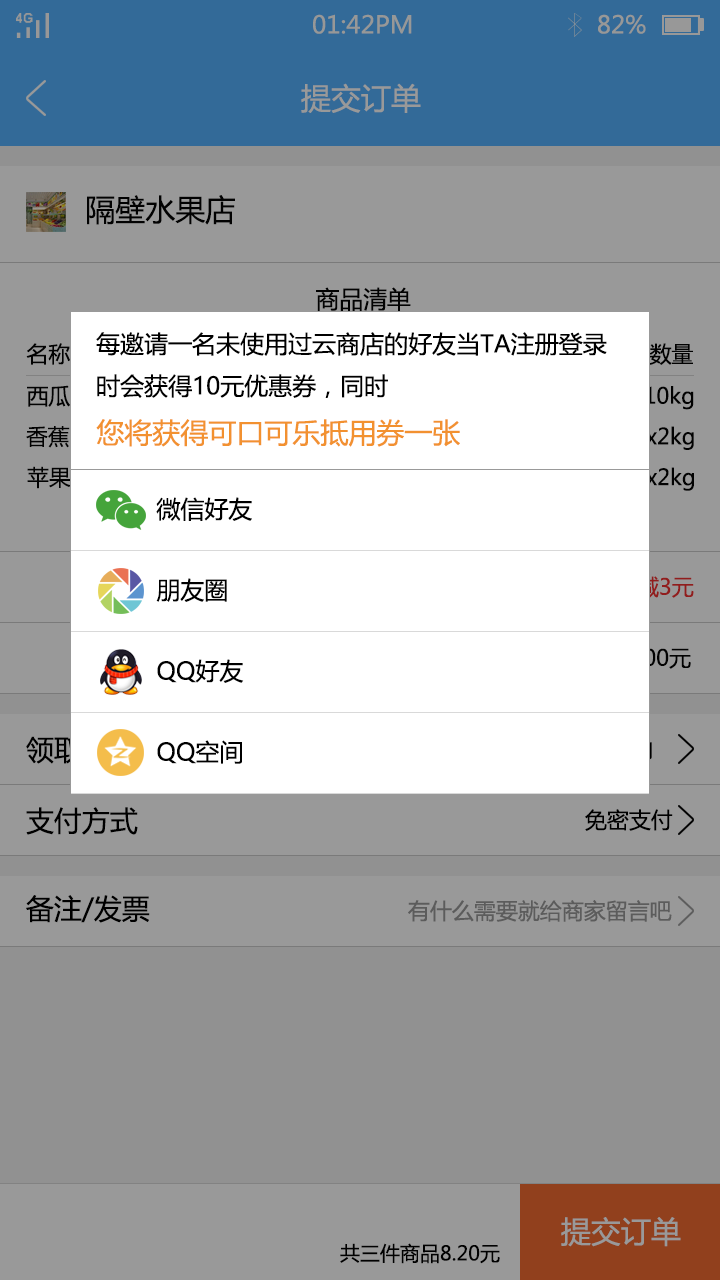
<style>
.page{position:relative;width:720px;height:1280px;background:#999999}
.page>*{position:absolute;margin:0}
.t1{font:24px "MicrosoftYaHei";color:#979897}
.t2{font:30px "MicrosoftYaHei";color:#999999}
.t3{font:30px "MicrosoftYaHei";color:#030303}
.t4{font:24px "MicrosoftYaHei";color:#030303}
.t5{font:24px "MicrosoftYaHei";color:#000000}
.t6{font:22px "MicrosoftYaHei";color:#030303}
.t7{font:28px "MicrosoftYaHei";color:#f29130}
.t8{font:22px "MicrosoftYaHei"}
.t9{font:28px "MicrosoftYaHei"}
.t10{font:28px "MicrosoftYaHei";color:#000000}
.t11{font:22px "MicrosoftYaHei";color:#000000}
.t12{font:22px "MicrosoftYaHei";color:#5c5c5c}
.t13{font:20px "MicrosoftYaHei";color:#000000}
</style>
<div class="page">
<p class="t1" style="left:313px;top:14px;width:99px;height:20px">01:42PM</p>
<p class="t1" style="left:598px;top:14px;width:48px;height:20px">82%</p>
<p class="t2" style="left:301px;top:83px;width:120px;height:30px">提交订单</p>
<p class="t3" style="left:87px;top:195px;width:148px;height:30px">隔壁水果店</p>
<p class="t4" style="left:316px;top:287px;width:95px;height:24px">商品清单</p>
<p class="t5" style="left:96px;top:332px;width:511px;height:66px">每邀请一名未使用过云商店的好友当TA注册登录<br>时会获得10元优惠券，同时</p>
<p class="t6" style="left:26px;top:343px;width:44px;height:22px">名称</p>
<p class="t6" style="left:649px;top:343px;width:44px;height:22px">数量</p>
<p class="t6" style="left:27px;top:385px;width:44px;height:22px">西瓜</p>
<p class="t6" style="left:632px;top:386px;width:62px;height:24px">x10kg</p>
<p class="t7" style="left:96px;top:419px;width:364px;height:28px">您将获得可口可乐抵用券一张</p>
<p class="t6" style="left:26px;top:426px;width:44px;height:22px">香蕉</p>
<p class="t6" style="left:646px;top:426px;width:48px;height:24px">x2kg</p>
<p class="t6" style="left:27px;top:466px;width:44px;height:23px">苹果</p>
<p class="t6" style="left:646px;top:467px;width:48px;height:24px">x2kg</p>
<p class="t5" style="left:156px;top:497px;width:96px;height:24px">微信好友</p>
<p class="t5" style="left:156px;top:578px;width:71px;height:24px">朋友圈</p>
<p class="t8" style="left:616px;top:576px;width:78px;height:22px">已减3元</p>
<p class="t5" style="left:157px;top:659px;width:87px;height:24px">QQ好友</p>
<p class="t9" style="left:26px;top:736px;width:111px;height:28px">领取时间</p>
<p class="t5" style="left:157px;top:740px;width:85px;height:24px">QQ空间</p>
<p class="t10" style="left:26px;top:807px;width:112px;height:28px">支付方式</p>
<p class="t11" style="left:585px;top:809px;width:88px;height:22px">免密支付</p>
<p class="t10" style="left:26px;top:895px;width:124px;height:28px">备注/发票</p>
<p class="t12" style="left:408px;top:900px;width:264px;height:22px">有什么需要就给商家留言吧</p>
<p class="t2" style="left:561px;top:1217px;width:120px;height:30px">提交订单</p>
<p class="t13" style="left:340px;top:1243px;width:160px;height:21px">共三件商品8.20元</p>
</div>
